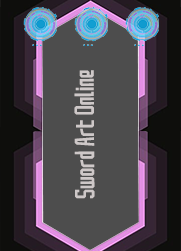
<style>
.page{position:relative;width:181px;height:251px;background:#4d4d4d}
.page>*{position:absolute;margin:0}
.t1{font:24px "SAOUI-Regular";color:#cec8c8}
</style>
<div class="page">
<p class="t1" style="left:74px;top:70px;width:21px;height:129px;rotate:-90deg">Sword Art Online</p>
</div>
